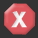
<style>
.page{position:relative;width:38px;height:38px;background:#333333}
.page>*{position:absolute;margin:0}
.t1{font:30px "MetaBold";color:#fefefe}
</style>
<div class="page">
<p class="t1" style="left:11px;top:11px;width:16px;height:17px">x</p>
</div>
